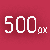
<style>
.page{position:relative;width:50px;height:50px;background:#c4314f}
.page>*{position:absolute;margin:0}
.t1{font:24.1px "EstandarRoundedW00-Light";color:#faf9fb;scale:0.88 1}
.t2{font:10.1px "EstandarRoundedW00-Light";color:#faf9fb;scale:0.88 1}
</style>
<div class="page">
<p class="t1" style="left:5px;top:16px;width:42px;height:18px">500<span class="t2">px</span></p>
</div>
